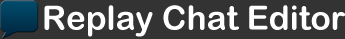
<style>
.page{position:relative;width:345px;height:39px;background:#333333}
.page>*{position:absolute;margin:0}
.t1{font:33.3px "ArialRoundedMTBold";color:#ffffff}
</style>
<div class="page">
<p class="t1" style="left:44px;top:5px;width:301px;height:32px">Replay Chat Editor</p>
</div>
